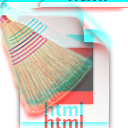
<style>
.page{position:relative;width:128px;height:128px}
.page>*{position:absolute;margin:0}
.t1{font:18px "LucidaGrande-Bold";letter-spacing:-0.02em}
</style>
<div class="page">
<p class="t1" style="left:44px;top:100px;width:39px;height:15px">html</p>
</div>
